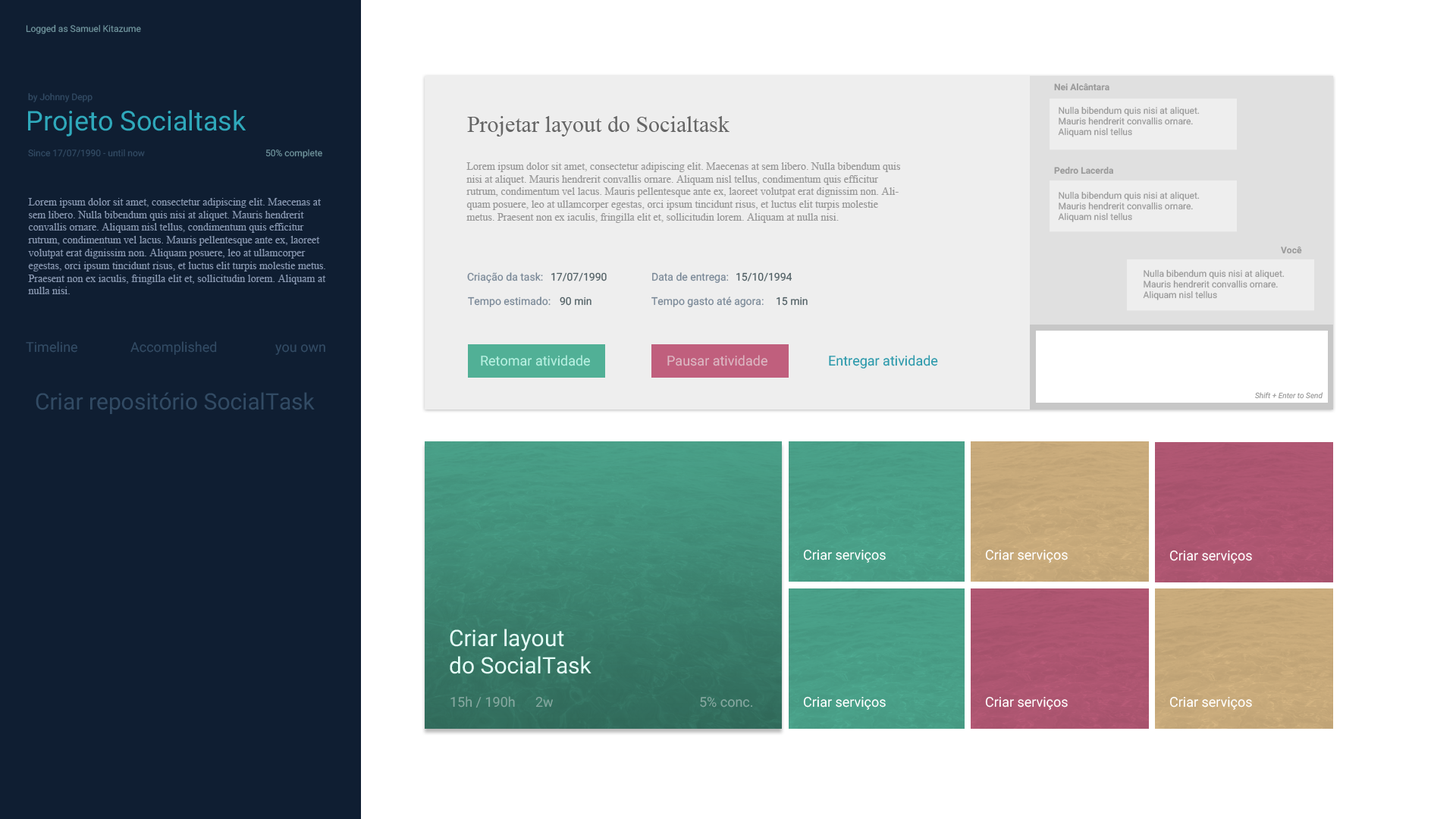
<style>
.page{position:relative;width:1456px;height:819px;background:#ffffff}
.page>*{position:absolute;margin:0}
.t1{font:9.1px "Roboto-Regular";color:#71969e}
.t2{font:9.1px "Roboto-Bold";color:#999999}
.t3{font:9.1px "Roboto-Regular";color:#324b64}
.t4{font:27.3px "Roboto-Regular";color:#2fa9bb}
.t5{font:9.1px "Roboto-Regular";color:#999999}
.t6{font:22.7px "TimesNewRomanPSMT";color:#666666}
.t7{font:10.6px "TimesNewRomanPSMT";color:#999999}
.t8{font:10.6px "TimesNewRomanPSMT";color:#8796af}
.t9{font:10.6px "Roboto-Regular";color:#788796}
.t10{font:10.6px "Roboto-Regular";color:#505f64}
.t11{font:13.6px "Roboto-Regular";color:#324b64}
.t12{font:13.6px "Roboto-Regular";color:#b9f1e2}
.t13{font:13.6px "Roboto-Regular";color:#dbb7c2}
.t14{font:13.6px "Roboto-Regular";color:#2b99ab}
.t15{font:22.7px "Roboto-Regular";color:#324b64}
.t16{font:7.6px "Roboto-Italic";color:#999999}
.t17{font:13.6px "Roboto-Regular";color:#fefefe}
.t18{font:22.7px "Roboto-Regular";color:#e6fff9}
.t19{font:13.6px "Roboto-Regular";color:#87a9a1}
</style>
<div class="page">
<p class="t1" style="left:26px;top:24px;width:115px;height:10px">Logged as Samuel Kitazume</p>
<p class="t2" style="left:1054px;top:83px;width:55px;height:8px">Nei Alcântara</p>
<p class="t3" style="left:28px;top:93px;width:65px;height:9px">by Johnny Depp</p>
<p class="t4" style="left:28px;top:110px;width:218px;height:26px">Projeto Socialtask</p>
<p class="t5" style="left:1058px;top:106px;width:142px;height:31px">Nulla bibendum quis nisi at aliquet. Mauris hendrerit convallis ornare. Aliquam nisl tellus</p>
<p class="t6" style="left:467px;top:116px;width:263px;height:20px">Projetar layout do Socialtask</p>
<p class="t3" style="left:28px;top:149px;width:117px;height:8px">Since 17/07/1990 - until now</p>
<p class="t1" style="left:265px;top:149px;width:57px;height:9px">50% complete</p>
<p class="t7" style="left:466px;top:162px;width:434px;height:61px">Lorem ipsum dolor sit amet, consectetur adipiscing elit. Maecenas at sem libero. Nulla bibendum quis nisi at aliquet. Mauris hendrerit convallis ornare. Aliquam nisl tellus, condimentum quis efficitur rutrum, condimentum vel lacus. Mauris pellentesque ante ex, laoreet volutpat erat dignissim non. Aliquam posuere, leo at ullamcorper egestas, orci ipsum tincidunt risus, et luctus elit turpis molestie metus. Praesent non ex iaculis, fringilla elit et, sollicitudin lorem. Aliquam at nulla nisi.</p>
<p class="t2" style="left:1054px;top:166px;width:59px;height:8px">Pedro Lacerda</p>
<p class="t8" style="left:28px;top:198px;width:298px;height:96px">Lorem ipsum dolor sit amet, consectetur adipiscing elit. Maecenas at sem libero. Nulla bibendum quis nisi at aliquet. Mauris hendrerit convallis ornare. Aliquam nisl tellus, condimentum quis efficitur rutrum, condimentum vel lacus. Mauris pellentesque ante ex, laoreet volutpat erat dignissim non. Aliquam posuere, leo at ullamcorper egestas, orci ipsum tincidunt risus, et luctus elit turpis molestie metus. Praesent non ex iaculis, fringilla elit et, sollicitudin lorem. Aliquam at nulla nisi.</p>
<p class="t5" style="left:1058px;top:191px;width:142px;height:31px">Nulla bibendum quis nisi at aliquet. Mauris hendrerit convallis ornare. Aliquam nisl tellus</p>
<p class="t2" style="left:1281px;top:246px;width:21px;height:8px">Você</p>
<p class="t5" style="left:1143px;top:269px;width:142px;height:31px">Nulla bibendum quis nisi at aliquet. Mauris hendrerit convallis ornare. Aliquam nisl tellus</p>
<p class="t9" style="left:467px;top:272px;width:76px;height:12px">Criação da task:</p>
<p class="t10" style="left:551px;top:272px;width:56px;height:9px">17/07/1990</p>
<p class="t9" style="left:652px;top:272px;width:77px;height:12px">Data de entrega:</p>
<p class="t10" style="left:736px;top:272px;width:56px;height:9px">15/10/1994</p>
<p class="t9" style="left:468px;top:297px;width:83px;height:10px">Tempo estimado:</p>
<p class="t10" style="left:560px;top:297px;width:31px;height:9px">90 min</p>
<p class="t9" style="left:651px;top:297px;width:113px;height:11px">Tempo gasto até agora:</p>
<p class="t10" style="left:777px;top:297px;width:31px;height:9px">15 min</p>
<p class="t11" style="left:26px;top:341px;width:51px;height:12px">Timeline</p>
<p class="t11" style="left:130px;top:341px;width:87px;height:14px">Accomplished</p>
<p class="t11" style="left:275px;top:344px;width:50px;height:11px">you own</p>
<p class="t12" style="left:481px;top:355px;width:109px;height:11px">Retomar atividade</p>
<p class="t13" style="left:667px;top:355px;width:100px;height:11px">Pausar atividade</p>
<p class="t14" style="left:829px;top:355px;width:109px;height:14px">Entregar atividade</p>
<p class="t15" style="left:36px;top:392px;width:279px;height:22px">Criar repositório SocialTask</p>
<p class="t16" style="left:1255px;top:392px;width:68px;height:7px">Shift + Enter to Send</p>
<p class="t17" style="left:803px;top:549px;width:83px;height:14px">Criar serviços</p>
<p class="t17" style="left:985px;top:549px;width:83px;height:14px">Criar serviços</p>
<p class="t17" style="left:1169px;top:550px;width:83px;height:13px">Criar serviços</p>
<p class="t18" style="left:450px;top:629px;width:141px;height:45px">Criar layout<br>do SocialTask</p>
<p class="t19" style="left:450px;top:696px;width:65px;height:12px">15h / 190h</p>
<p class="t19" style="left:535px;top:696px;width:18px;height:12px">2w</p>
<p class="t19" style="left:700px;top:696px;width:52px;height:12px">5% conc.</p>
<p class="t17" style="left:803px;top:696px;width:83px;height:14px">Criar serviços</p>
<p class="t17" style="left:985px;top:696px;width:83px;height:14px">Criar serviços</p>
<p class="t17" style="left:1169px;top:696px;width:83px;height:14px">Criar serviços</p>
</div>
